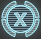
<style>
.page{position:relative;width:41px;height:39px}
.page>*{position:absolute;margin:0}
.t1{font:25px "FontinSansCR-Bold"}
</style>
<div class="page">
<p class="t1" style="left:14px;top:13px;width:13px;height:13px">x</p>
</div>
